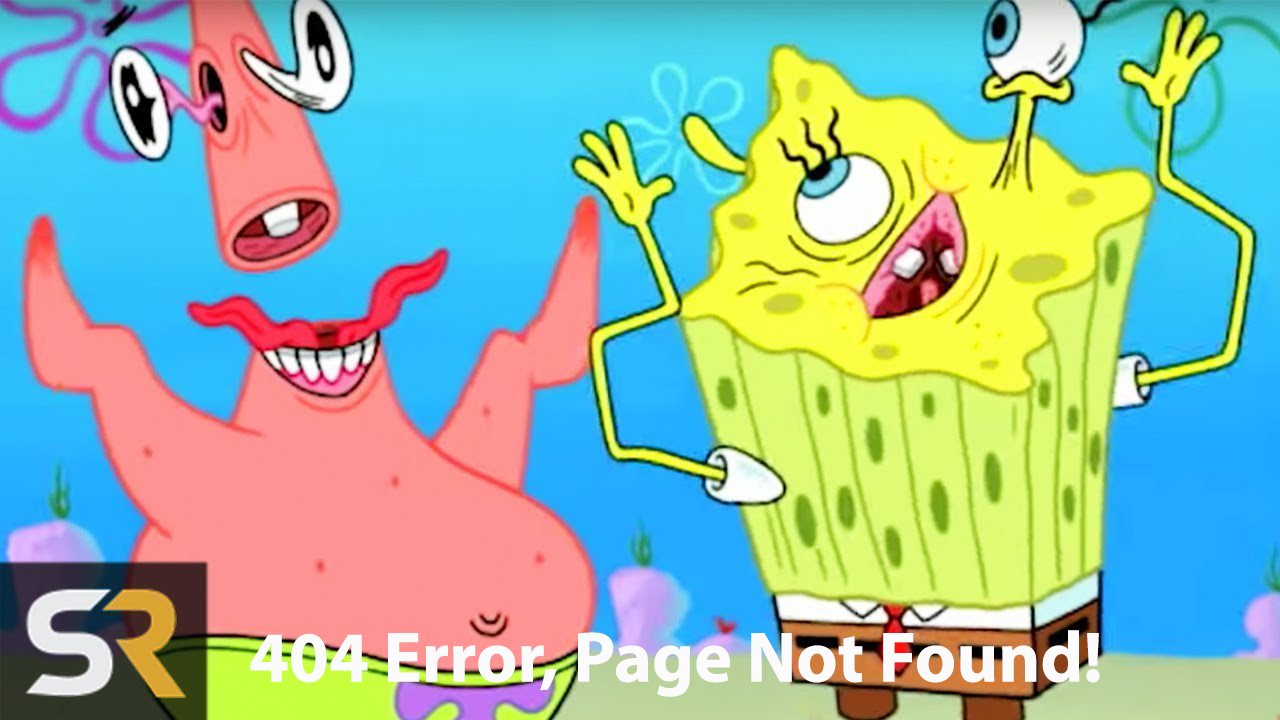
<style>
.page{position:relative;width:1280px;height:720px}
.page>*{position:absolute;margin:0}
.t1{font:72px "MyriadPro-Bold";color:#fbfbfb}
</style>
<div class="page">
<p class="t1" style="left:250px;top:630px;width:850px;height:67px">404 Error, Page Not Found!</p>
</div>
